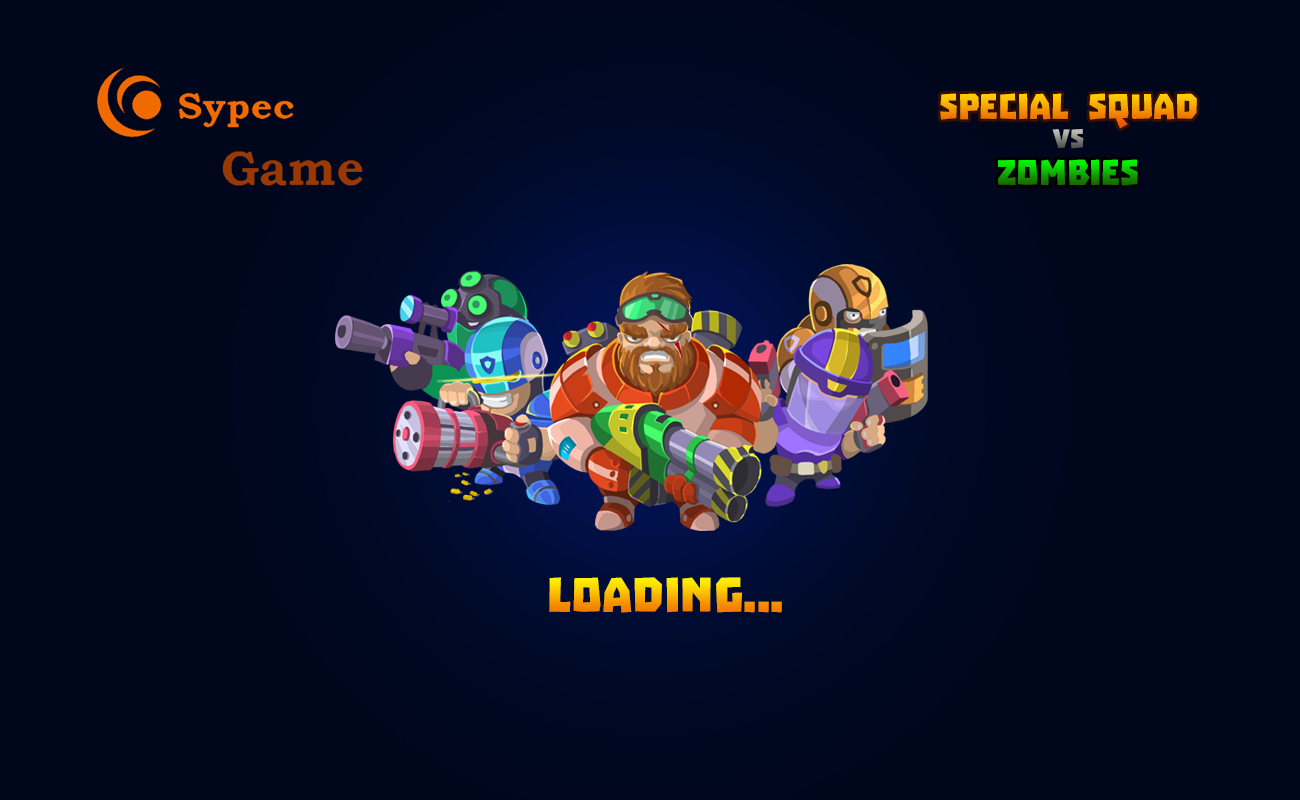
<style>
.page{position:relative;width:1300px;height:800px;background:#00071c}
.page>*{position:absolute;margin:0}
.t1{font:40.4px "Millennia1"}
.t2{font:30.2px "Millennia1"}
.t3{font:55px "Millennia1"}
</style>
<div class="page">
<p class="t1" style="left:940px;top:93px;width:257px;height:36px">Special Squad</p>
<p class="t2" style="left:1052px;top:129px;width:32px;height:20px">vs</p>
<p class="t1" style="left:998px;top:159px;width:140px;height:27px">Zombies</p>
<p class="t3" style="left:549px;top:577px;width:233px;height:36px">Loading...</p>
</div>
